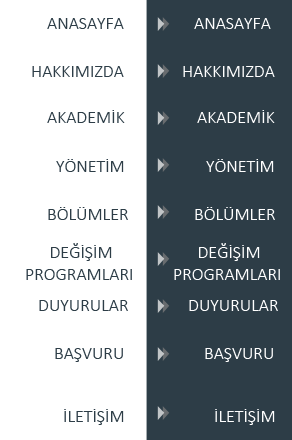
<style>
.page{position:relative;width:292px;height:440px;background:#ffffff}
.page>*{position:absolute;margin:0}
.t1{font:18px "Calibri-Light";color:#2d3d47}
.t2{font:18px "Calibri-Light";color:#ffffff}
</style>
<div class="page">
<p class="t1" style="left:47px;top:18px;width:77px;height:11px">ANASAYFA</p>
<p class="t2" style="left:194px;top:18px;width:77px;height:11px">ANASAYFA</p>
<p class="t1" style="left:32px;top:66px;width:92px;height:11px">HAKKIMIZDA</p>
<p class="t2" style="left:183px;top:66px;width:92px;height:11px">HAKKIMIZDA</p>
<p class="t1" style="left:47px;top:110px;width:78px;height:13px">AKADEMİK</p>
<p class="t2" style="left:197px;top:110px;width:78px;height:13px">AKADEMİK</p>
<p class="t1" style="left:56px;top:159px;width:68px;height:13px">YÖNETİM</p>
<p class="t2" style="left:206px;top:159px;width:68px;height:13px">YÖNETİM</p>
<p class="t1" style="left:48px;top:207px;width:80px;height:13px">BÖLÜMLER</p>
<p class="t2" style="left:195px;top:207px;width:80px;height:13px">BÖLÜMLER</p>
<p class="t1" style="left:26px;top:243px;width:106px;height:37px">DEĞİŞİM PROGRAMLARI</p>
<p class="t2" style="left:174px;top:243px;width:106px;height:37px">DEĞİŞİM PROGRAMLARI</p>
<p class="t1" style="left:39px;top:300px;width:89px;height:11px">DUYURULAR</p>
<p class="t2" style="left:189px;top:300px;width:89px;height:11px">DUYURULAR</p>
<p class="t1" style="left:55px;top:348px;width:68px;height:14px">BAŞVURU</p>
<p class="t2" style="left:205px;top:348px;width:68px;height:14px">BAŞVURU</p>
<p class="t1" style="left:64px;top:409px;width:60px;height:16px">İLETİŞİM</p>
<p class="t2" style="left:215px;top:409px;width:60px;height:16px">İLETİŞİM</p>
</div>
